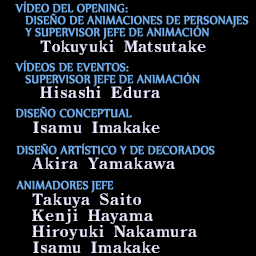
<style>
.page{position:relative;width:256px;height:256px;background:#000000}
.page>*{position:absolute;margin:0}
.t1{font:14px/12px "Nyala-Regular";color:#70b0f0;font-weight:bold;scale:0.9 1}
.t2{font:14px "Nyala-Regular";color:#70b0f0;font-weight:bold;scale:0.9 1}
</style>
<div class="page">
<p class="t1" style="left:15px;top:1px;width:234px;height:39px">VÍDEO DEL OPENING:<br>   DISEÑO DE ANIMACIONES DE PERSONAJES<br>   Y SUPERVISOR JEFE DE ANIMACIÓN</p>
<p class="t1" style="left:15px;top:60px;width:185px;height:27px">VÍDEOS DE EVENTOS:<br>   SUPERVISOR JEFE DE ANIMACIÓN</p>
<p class="t2" style="left:15px;top:106px;width:117px;height:12px">DISEÑO CONCEPTUAL</p>
<p class="t2" style="left:16px;top:143px;width:199px;height:12px">DISEÑO ARTÍSTICO Y DE DECORADOS</p>
<p class="t2" style="left:16px;top:180px;width:98px;height:13px">ANIMADORES JEFE</p>
</div>
